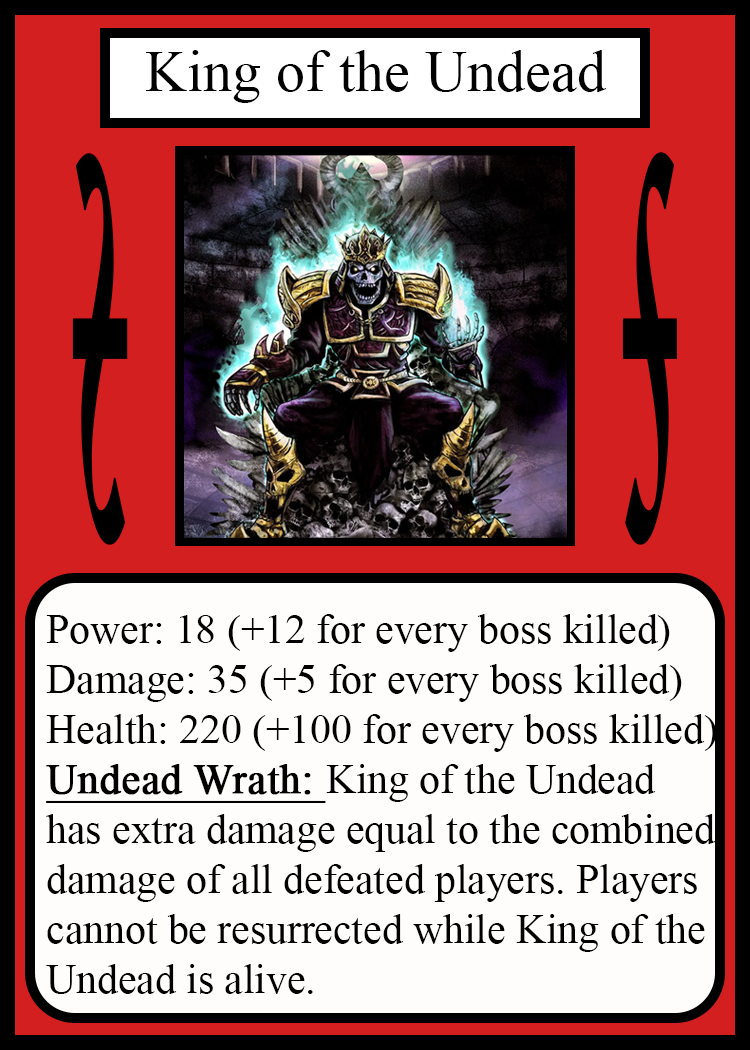
<style>
.page{position:relative;width:750px;height:1050px;background:#fffcfc}
.page>*{position:absolute;margin:0}
.t1{font:58.3px "TimesNewRomanPSMT";color:#010101}
.t2{font:814.3px "Apple-Chancery";color:#000000;font-weight:bold;scale:0.17 1}
.t3{font:814.6px "Apple-Chancery";color:#000000;font-weight:bold;scale:0.17 1}
.t4{font:41.7px "TimesNewRomanPSMT";color:#000000}
.t5{font:41.7px "TimesNewRomanPSMT";color:#000000;font-weight:bold;text-decoration:underline}
</style>
<div class="page">
<p class="t1" style="left:146px;top:50px;width:461px;height:53px">King of the Undead</p>
<p class="t2" style="left:72px;top:153px;width:56px;height:392px;rotate:180deg">s</p>
<p class="t3" style="left:622px;top:152px;width:55px;height:393px">s</p>
<p class="t4" style="left:46px;top:614px;width:671px;height:380px">Power: 18 (+12 for every boss killed)<br>Damage: 35 (+5 for every boss killed)<br>Health: 220 (+100 for every boss killed)<br><span class="t5">Undead Wrath: </span>King of the Undead<br>has extra damage equal to the combined<br>damage of all defeated players. Players<br>cannot be resurrected while King of the<br>Undead is alive.</p>
</div>
